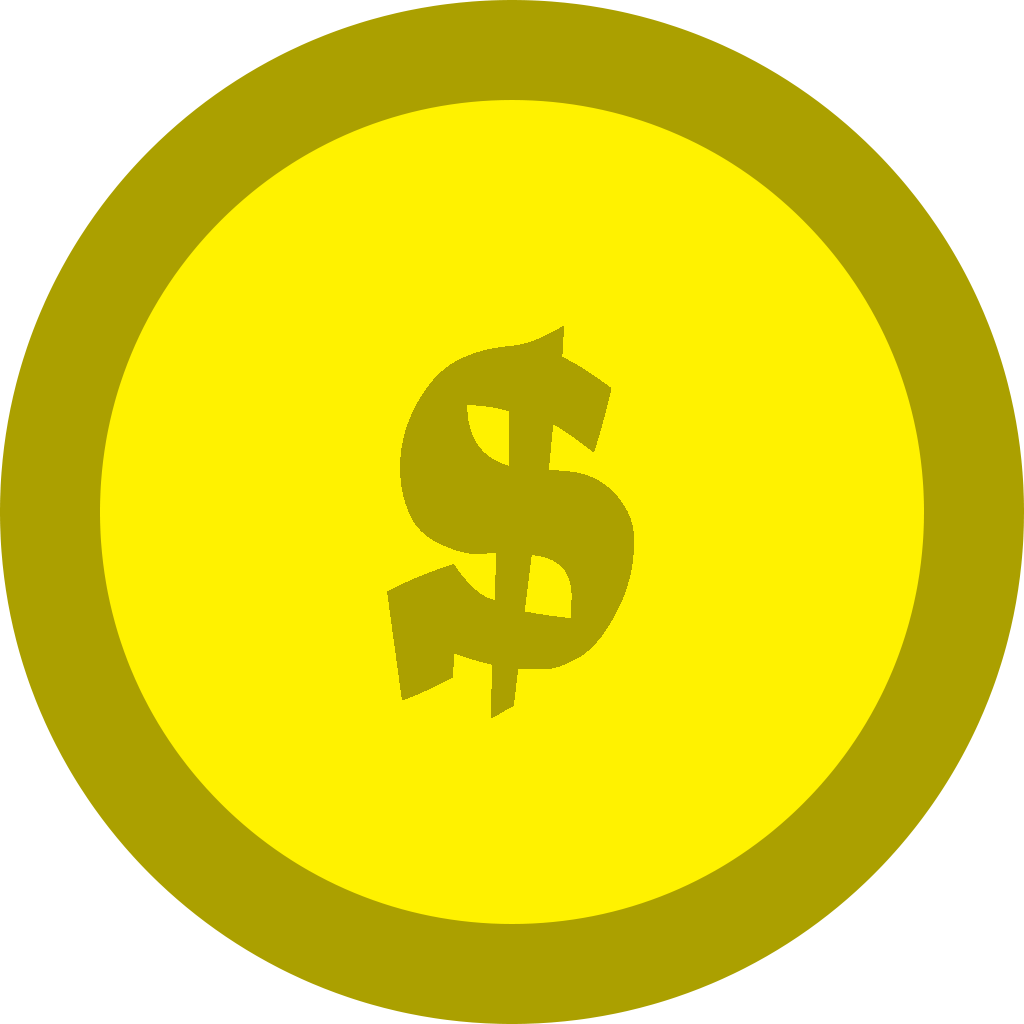
<style>
.page{position:relative;width:1024px;height:1024px;background:#fff200}
.page>*{position:absolute;margin:0}
.t1{font:512px "MaturaMTScriptCapitals";color:#aba000}
</style>
<div class="page">
<p class="t1" style="left:387px;top:326px;width:247px;height:392px">$</p>
</div>
